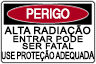
<style>
.page{position:relative;width:96px;height:64px;background:#ffffff}
.page>*{position:absolute;margin:0}
.t1{font:12.6px "Helvetica";letter-spacing:-0.005em;color:#ffffff;font-weight:bold;scale:0.86 1}
.t2{font:10px/10px "ArialMT";letter-spacing:-0.06em;color:#000000;text-transform:uppercase;font-weight:bold;scale:0.67 1}
.t3{font:10px/8px "ArialMT";letter-spacing:-0.02em;color:#000000;text-transform:uppercase;font-weight:bold;scale:1.04 1}
.t4{font:8.3px/8px "ArialMT";color:#000000;text-transform:uppercase;font-weight:bold;scale:1.09 1}
.t5{font:8.3px/7px "ArialMT";color:#000000;text-transform:uppercase;font-weight:bold;scale:1.09 1}
.t6{font:11px/10px "ArialMT";letter-spacing:-0.06em;color:#000000;text-transform:uppercase;font-weight:bold;scale:0.67 1}
</style>
<div class="page">
<p class="t1" style="left:26px;top:8px;width:44px;height:11px">PERIGO</p>
<p class="t2" style="left:1px;top:25px;width:94px;height:37px;text-align:center"><span class="t3">ALTA RADIAÇÃO<br></span><span class="t4">ENTRAR PODE<br></span><span class="t5">SER FATAL<br></span>use proteção adequa<span class="t6">da</span></p>
</div>
